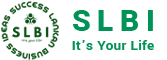
<style>
.page{position:relative;width:167px;height:60px;background:#ffffff}
.page>*{position:absolute;margin:0}
.t1{font:33px "Yantramanav-Black";letter-spacing:0.2em;color:#009358}
.t2{font:15px "Yantramanav-Bold";letter-spacing:0.02em;color:#009358}
</style>
<div class="page">
<p class="t1" style="left:73px;top:10px;width:80px;height:21px">SLBI</p>
<p class="t2" style="left:72px;top:40px;width:82px;height:10px">It’s Your Life</p>
</div>
